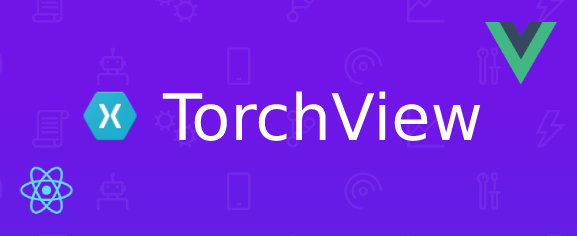
<style>
.page{position:relative;width:577px;height:236px;background:#7014e8}
.page>*{position:absolute;margin:0}
.t1{font:64px "DejaVuSans";color:#ffffff}
</style>
<div class="page">
<p class="t1" style="left:162px;top:91px;width:319px;height:50px">TorchView</p>
</div>
